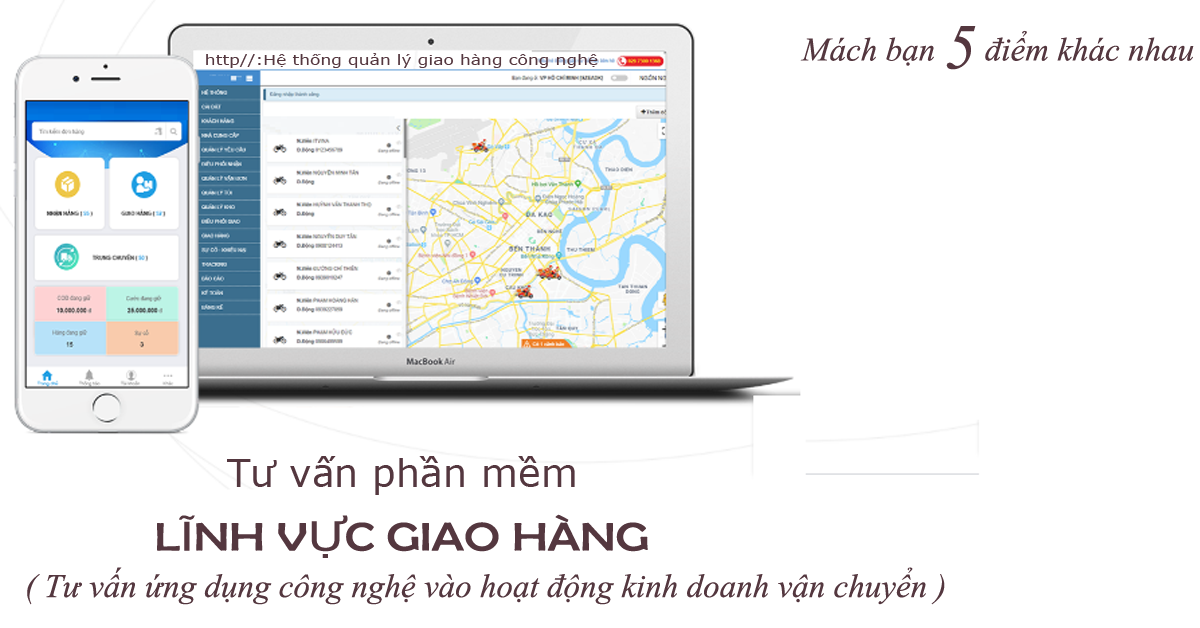
<style>
.page{position:relative;width:1200px;height:628px;background:#ffffff}
.page>*{position:absolute;margin:0}
.t1{font:33.1px "TimesNewRomanPS-ItalicMT";color:#54373f}
.t2{font:64px "TimesNewRomanPS-ItalicMT";color:#54373f}
.t3{font:13.9px "Verdana";color:#54373f;scale:1.23 1}
.t4{font:38.2px "Verdana";color:#54373f}
.t5{font:40px "BerlinSansFB-Reg";color:#54373f;scale:1.23 1}
.t6{font:40px "TrebuchetMS";color:#54373f;scale:1.23 1}
.t7{font:40px "Verdana";color:#54373f;scale:1.23 1}
</style>
<div class="page">
<p class="t1" style="left:800px;top:30px;width:394px;height:36px">Mách bạn      điểm khác nhau</p>
<p class="t2" style="left:946px;top:26px;width:30px;height:44px">5</p>
<p class="t3" style="left:206px;top:53px;width:392px;height:15px">http//:Hệ thống quản lý giao hàng công nghệ</p>
<p class="t4" style="left:227px;top:456px;width:348px;height:39px">Tư vấn phần mềm</p>
<p class="t5" style="left:157px;top:514px;width:491px;height:44px">L<span class="t6">Ĩ</span>NH V<span class="t7">Ự</span>C GIAO HÀNG</p>
<p class="t1" style="left:27px;top:567px;width:918px;height:38px">( Tư vấn ứng dụng công nghệ vào hoạt động kinh doanh vận chuyển )</p>
</div>
